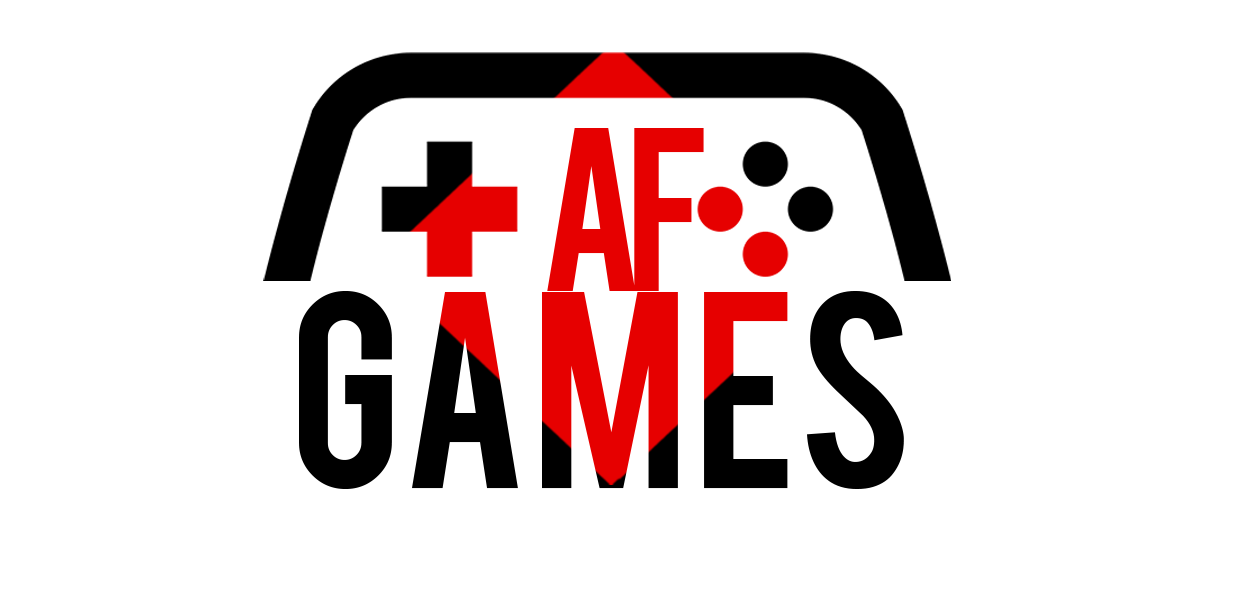
<style>
.page{position:relative;width:1240px;height:591px;background:#ffffff}
.page>*{position:absolute;margin:0}
.t1{font:180.6px "Bebas";letter-spacing:-0.115em;color:#e60000}
.t2{font:218.5px "Bebas";color:#000000}
</style>
<div class="page">
<p class="t1" style="left:547px;top:128px;width:157px;height:163px">af</p>
<p class="t2" style="left:299px;top:291px;width:605px;height:198px">GAMES</p>
</div>
